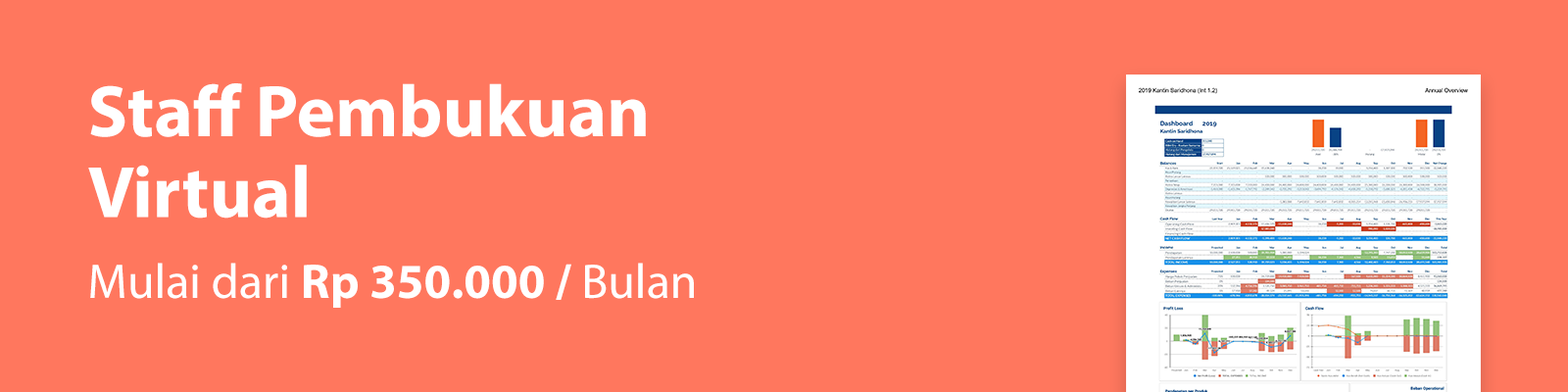
<style>
.page{position:relative;width:1568px;height:392px;background:#ff775e}
.page>*{position:absolute;margin:0}
.t1{font:73.5px/80.8px "MyriadPro-Bold";color:#ffffff}
.t2{font:49px/80.8px "MyriadPro-Regular";color:#ffffff}
.t3{font:49px/80.8px "MyriadPro-Bold";color:#ffffff}
</style>
<div class="page">
<p class="t1" style="left:88px;top:83px;width:606px;height:225px">Staff Pembukuan<br>Virtual<br><span class="t2">Mulai dari </span><span class="t3">Rp 350.000 / </span><span class="t2">Bulan</span></p>
</div>
